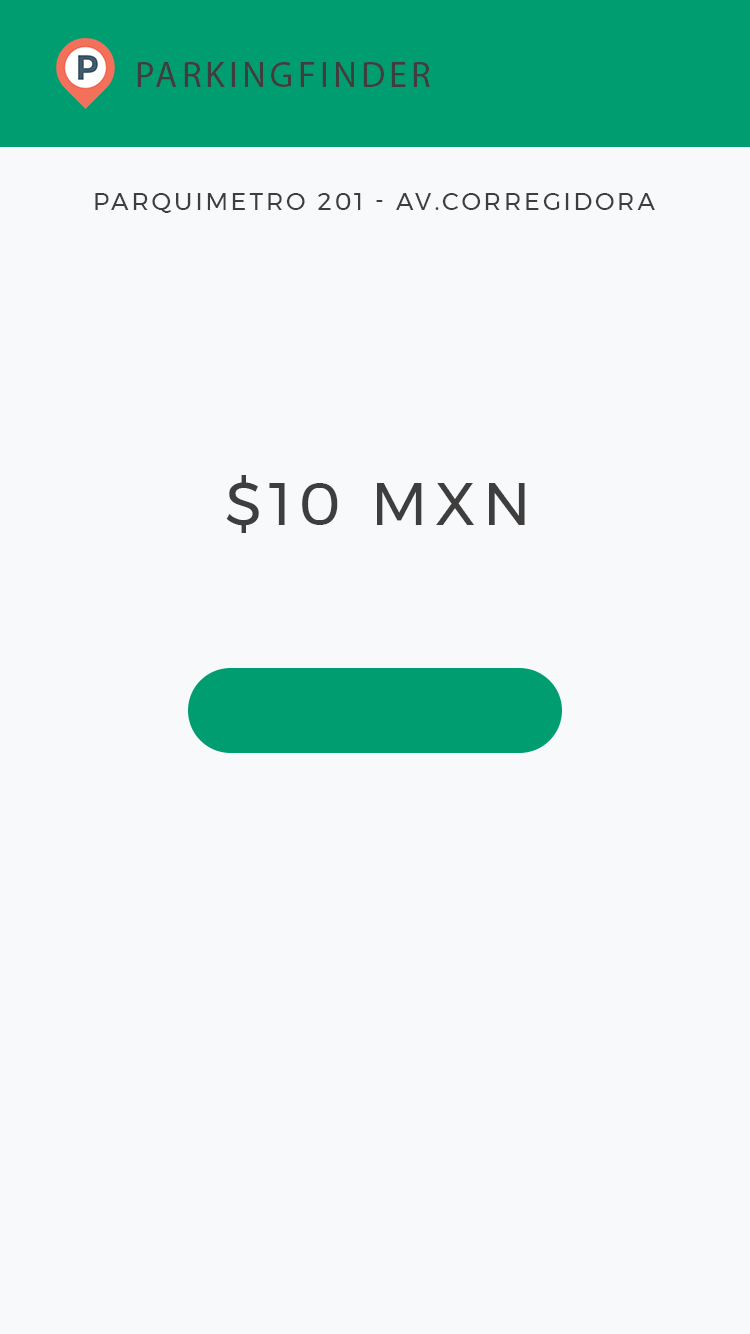
<style>
.page{position:relative;width:750px;height:1334px;background:#f8f9fa}
.page>*{position:absolute;margin:0}
.t1{font:36px "MyriadPro-Regular";letter-spacing:0.12em;color:#3f3e3e;text-transform:uppercase}
.t2{font:24px "Montserrat-Regular";letter-spacing:0.12em;color:#3f3e3e;text-transform:uppercase}
.t3{font:60px "Montserrat-Regular";letter-spacing:0.12em;color:#3f3e3e;text-transform:uppercase}
</style>
<div class="page">
<p class="t1" style="left:137px;top:62px;width:293px;height:25px">ParkingFInder</p>
<p class="t2" style="left:95px;top:193px;width:560px;height:20px">PARQUIMETRO 201 - AV.cORREGIDORA</p>
<p class="t3" style="left:226px;top:475px;width:299px;height:58px">$10 mxn</p>
</div>
